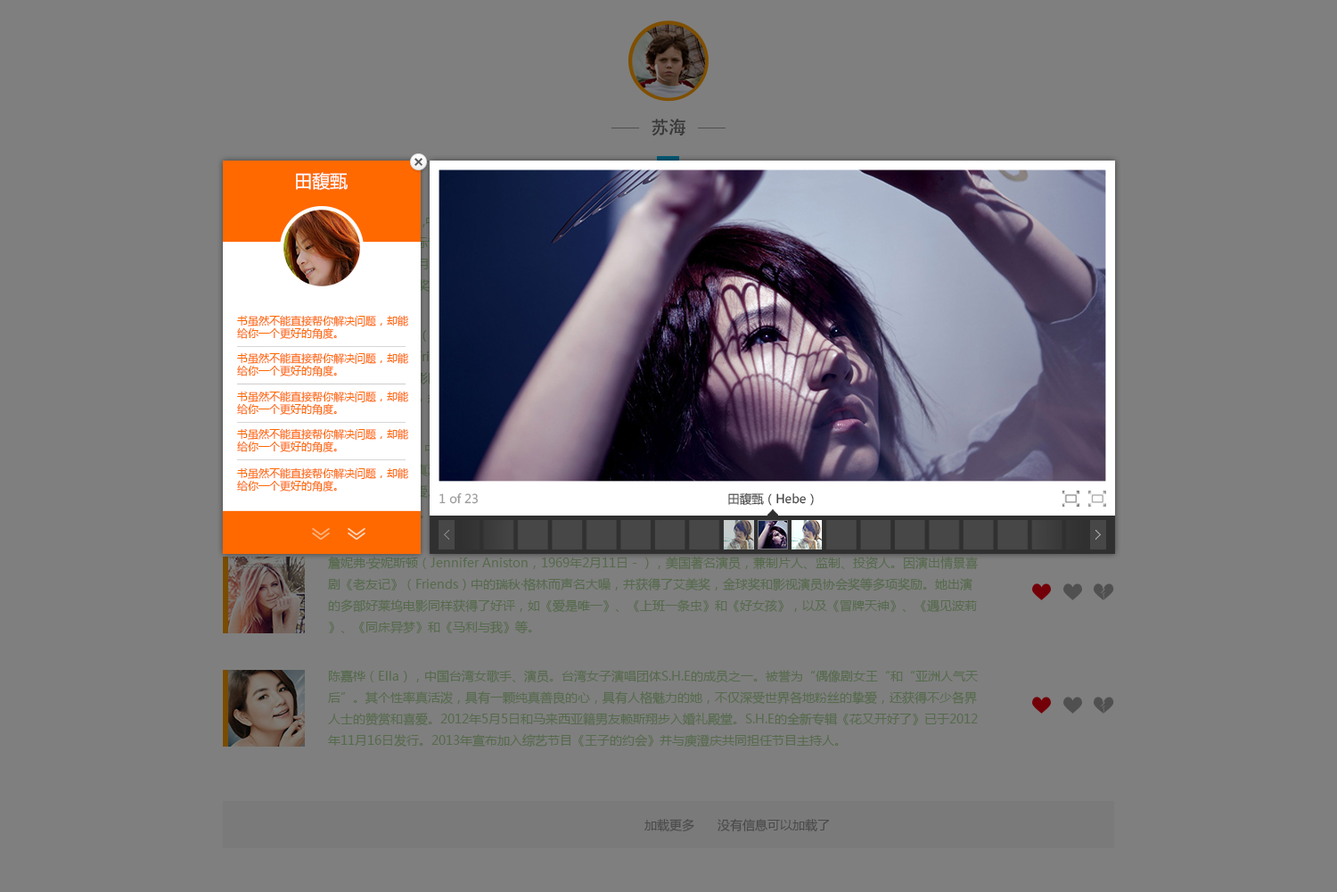
<style>
.page{position:relative;width:1337px;height:892px;background:#7f7f7f}
.page>*{position:absolute;margin:0}
.t1{font:17.7px "AdobeHeitiStd-Regular";color:#383838}
.t2{font:17.8px "MicrosoftYaHei";color:#ffffff;text-transform:uppercase}
.t3{font:10.7px/12.5px "MicrosoftYaHei";color:#ff6901}
.t4{font:12px "MicrosoftYaHei";color:#9c9c9c}
.t5{font:12px "MicrosoftYaHei";color:#474747}
.t6{font:12.5px/21.4px "MicrosoftYaHei";color:#566a4c}
.t7{font:12.5px "MicrosoftYaHei";color:#4a4a4a}
</style>
<div class="page">
<p class="t1" style="left:652px;top:119px;width:34px;height:17px">苏海</p>
<p class="t2" style="left:296px;top:172px;width:52px;height:18px">田馥甄</p>
<p class="t3" style="left:237px;top:315px;width:171px;height:24px">书虽然不能直接帮你解决问题，却能<br>给你一个更好的角度。</p>
<p class="t3" style="left:237px;top:352px;width:171px;height:24px">书虽然不能直接帮你解决问题，却能<br>给你一个更好的角度。</p>
<p class="t3" style="left:237px;top:391px;width:171px;height:24px">书虽然不能直接帮你解决问题，却能<br>给你一个更好的角度。</p>
<p class="t3" style="left:237px;top:428px;width:171px;height:24px">书虽然不能直接帮你解决问题，却能<br>给你一个更好的角度。</p>
<p class="t3" style="left:237px;top:467px;width:171px;height:24px">书虽然不能直接帮你解决问题，却能<br>给你一个更好的角度。</p>
<p class="t4" style="left:440px;top:492px;width:39px;height:12px">1 of 23</p>
<p class="t5" style="left:728px;top:492px;width:86px;height:14px">田馥甄（Hebe）</p>
<p class="t6" style="left:328px;top:556px;width:650px;height:78px">詹妮弗·安妮斯顿（Jennifer Aniston，1969年2月11日－），美国著名演员，兼制片人、监制、投资人。因演出情景喜剧《老友记》（Friends）中的瑞秋·格林而声名大噪，并获得了艾美奖，金球奖和影视演员协会奖等多项奖励。她出演的多部好莱坞电影同样获得了好评，如《爱是唯一》、《上班一条虫》和《好女孩》，以及《冒牌天神》、《遇见波莉》、《同床异梦》和《马利与我》等。</p>
<p class="t6" style="left:328px;top:670px;width:650px;height:77px">陈嘉桦（Ella），中国台湾女歌手、演员。台湾女子演唱团体S.H.E的成员之一。被誉为“偶像剧女王“和“亚洲人气天后”。其个性率真活泼，具有一颗纯真善良的心，具有人格魅力的她，不仅深受世界各地粉丝的挚爱，还获得不少各界人士的赞赏和喜爱。2012年5月5日和马来西亚籍男友赖斯翔步入婚礼殿堂。S.H.E的全新专辑《花又开好了》已于2012年11月16日发行。2013年宣布加入综艺节目《王子的约会》并与庾澄庆共同担任节目主持人。</p>
<p class="t7" style="left:645px;top:818px;width:50px;height:14px">加载更多</p>
<p class="t7" style="left:718px;top:818px;width:111px;height:14px">没有信息可以加载了</p>
</div>
